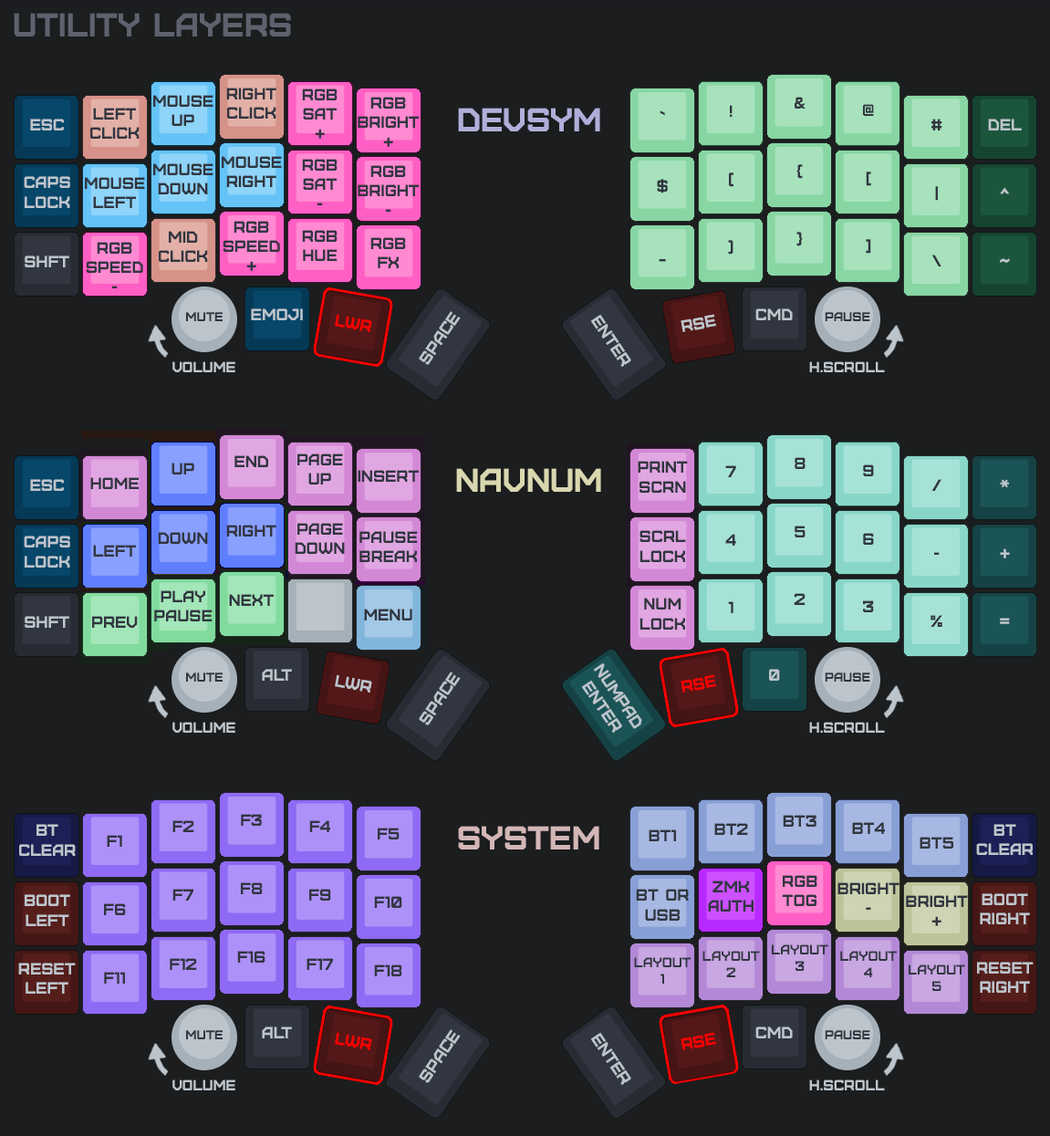
<style>
.page{position:relative;width:1050px;height:1136px;background:#1b1d1e}
.page>*{position:absolute;margin:0}
.t1{font:32.8px "Furore";color:#5d626e}
.t2{font:16.4px "Furore";color:#313640}
.t3{font:32.8px "Furore";color:#afafd9}
.t4{font:16.4px "Furore";color:#bdc5cc}
.t5{font:12.8px "Furore";color:#313640}
.t6{font:16.4px "Furore";color:#ff0000}
.t7{font:14.6px "Furore";color:#bdc5cc}
.t8{font:32.8px "Furore";color:#d9d7af}
.t9{font:32.8px "Furore";color:#d3b6b6}
.t10{font:13.7px "Furore";color:#313640}
</style>
<div class="page">
<p class="t1" style="left:14px;top:13px;width:277px;height:23px">UTILITY LAYERS</p>
<p class="t2" style="left:226px;top:88px;width:50px;height:31px;text-align:center">RIGHT<br>CLICK</p>
<p class="t2" style="left:302px;top:88px;width:36px;height:51px;text-align:center">RGB<br>SAT<br>+</p>
<p class="t2" style="left:153px;top:95px;width:60px;height:31px;text-align:center">MOUSE<br>UP</p>
<p class="t2" style="left:358px;top:97px;width:62px;height:50px;text-align:center">RGB<br>BRIGHT<br>+</p>
<p class="t2" style="left:795px;top:97px;width:10px;height:12px">&amp;</p>
<p class="t2" style="left:90px;top:108px;width:50px;height:31px;text-align:center">LEFT<br>CLICK</p>
<p class="t3" style="left:458px;top:108px;width:142px;height:23px">DEVSYM</p>
<p class="t2" style="left:660px;top:110px;width:5px;height:6px">`</p>
<p class="t2" style="left:730px;top:105px;width:3px;height:12px">!</p>
<p class="t2" style="left:863px;top:104px;width:11px;height:12px">@</p>
<p class="t4" style="left:30px;top:119px;width:34px;height:11px">ESC</p>
<p class="t2" style="left:931px;top:119px;width:11px;height:11px">#</p>
<p class="t4" style="left:988px;top:119px;width:34px;height:11px">del</p>
<p class="t2" style="left:222px;top:156px;width:60px;height:31px;text-align:center">MOUSE<br>RIGHT</p>
<p class="t2" style="left:302px;top:159px;width:36px;height:46px;text-align:center">RGB<br>SAT<br>-</p>
<p class="t2" style="left:153px;top:163px;width:60px;height:31px;text-align:center">MOUSE<br>DOWN</p>
<p class="t2" style="left:358px;top:165px;width:62px;height:47px;text-align:center">RGB<br>BRIGHT<br>-</p>
<p class="t2" style="left:729px;top:172px;width:4px;height:15px">(</p>
<p class="t2" style="left:796px;top:164px;width:7px;height:15px">{</p>
<p class="t2" style="left:866px;top:171px;width:5px;height:15px">[</p>
<p class="t4" style="left:24px;top:176px;width:46px;height:32px;text-align:center">Caps<br>lock</p>
<p class="t2" style="left:85px;top:177px;width:60px;height:31px;text-align:center">MOUSE<br>LEFT</p>
<p class="t2" style="left:657px;top:179px;width:11px;height:14px">$</p>
<p class="t2" style="left:935px;top:186px;width:3px;height:15px">|</p>
<p class="t4" style="left:1000px;top:187px;width:10px;height:7px">^</p>
<p class="t2" style="left:223px;top:221px;width:57px;height:50px;text-align:center">RGB<br>SPEED<br>+</p>
<p class="t2" style="left:159px;top:231px;width:49px;height:31px;text-align:center">MID<br>CLICK</p>
<p class="t2" style="left:302px;top:230px;width:36px;height:31px;text-align:center">RGB<br>HUE</p>
<p class="t2" style="left:796px;top:232px;width:7px;height:14px">}</p>
<p class="t2" style="left:86px;top:242px;width:57px;height:46px;text-align:center">RGB<br>SPEED<br>-</p>
<p class="t2" style="left:370px;top:237px;width:36px;height:31px;text-align:center">RGB<br>FX</p>
<p class="t2" style="left:728px;top:240px;width:5px;height:15px">)</p>
<p class="t2" style="left:866px;top:239px;width:5px;height:15px">]</p>
<p class="t4" style="left:25px;top:255px;width:44px;height:12px">SHFT</p>
<p class="t2" style="left:931px;top:255px;width:10px;height:11px">\</p>
<p class="t2" style="left:659px;top:259px;width:7px;height:3px">_</p>
<p class="t4" style="left:1000px;top:258px;width:10px;height:5px">~</p>
<p class="t5" style="left:186px;top:312px;width:37px;height:9px">MUTE</p>
<p class="t4" style="left:251px;top:308px;width:52px;height:12px">EMOJI</p>
<p class="t6" style="left:335px;top:314px;width:37px;height:18px;rotate:10deg">LWR</p>
<p class="t4" style="left:419px;top:311px;width:42px;height:54px;rotate:-56deg">SPACE</p>
<p class="t4" style="left:590px;top:314px;width:41px;height:53px;rotate:56deg">ENTER</p>
<p class="t4" style="left:681px;top:314px;width:35px;height:18px;rotate:-10deg">RSE</p>
<p class="t4" style="left:755px;top:308px;width:38px;height:12px">CMD</p>
<p class="t5" style="left:825px;top:312px;width:45px;height:9px">PAUSE</p>
<p class="t7" style="left:172px;top:361px;width:63px;height:11px">VOLUME</p>
<p class="t7" style="left:809px;top:361px;width:76px;height:11px">H.SCROLL</p>
<p class="t2" style="left:234px;top:455px;width:34px;height:12px">end</p>
<p class="t2" style="left:297px;top:453px;width:46px;height:31px;text-align:center">PAGE<br>UP</p>
<p class="t2" style="left:638px;top:461px;width:50px;height:32px;text-align:center">PRINT<br>SCRN</p>
<p class="t2" style="left:795px;top:457px;width:10px;height:12px">8</p>
<p class="t2" style="left:171px;top:462px;width:23px;height:12px">up</p>
<p class="t2" style="left:358px;top:470px;width:61px;height:12px">insert</p>
<p class="t8" style="left:456px;top:468px;width:145px;height:24px">NAVNUM</p>
<p class="t2" style="left:725px;top:465px;width:11px;height:12px">7</p>
<p class="t2" style="left:863px;top:464px;width:11px;height:12px">9</p>
<p class="t4" style="left:30px;top:479px;width:34px;height:12px">ESC</p>
<p class="t2" style="left:90px;top:477px;width:49px;height:12px">home</p>
<p class="t2" style="left:931px;top:479px;width:10px;height:12px">/</p>
<p class="t4" style="left:1000px;top:479px;width:9px;height:9px">*</p>
<p class="t2" style="left:158px;top:532px;width:50px;height:12px">DOWN</p>
<p class="t2" style="left:226px;top:525px;width:50px;height:11px">RIGHT</p>
<p class="t2" style="left:295px;top:523px;width:50px;height:31px;text-align:center">PAGE<br>DOWN</p>
<p class="t2" style="left:359px;top:531px;width:59px;height:31px;text-align:center">PAUSE<br>BREAK</p>
<p class="t2" style="left:639px;top:530px;width:47px;height:32px;text-align:center">SCRL<br>lock</p>
<p class="t2" style="left:725px;top:534px;width:11px;height:12px">4</p>
<p class="t2" style="left:795px;top:525px;width:10px;height:12px">5</p>
<p class="t2" style="left:863px;top:533px;width:11px;height:12px">6</p>
<p class="t4" style="left:24px;top:535px;width:46px;height:32px;text-align:center">caps<br>lock</p>
<p class="t2" style="left:93px;top:545px;width:43px;height:11px">LEFT</p>
<p class="t2" style="left:934px;top:552px;width:6px;height:3px">-</p>
<p class="t4" style="left:1000px;top:548px;width:10px;height:10px">+</p>
<p class="t2" style="left:154px;top:590px;width:59px;height:31px;text-align:center">PLAY<br>PAUSE</p>
<p class="t2" style="left:229px;top:594px;width:45px;height:12px">NEXT</p>
<p class="t2" style="left:794px;top:593px;width:11px;height:12px">2</p>
<p class="t2" style="left:639px;top:597px;width:46px;height:32px;text-align:center">NUM<br>lock</p>
<p class="t2" style="left:728px;top:601px;width:5px;height:12px">1</p>
<p class="t2" style="left:863px;top:600px;width:11px;height:12px">3</p>
<p class="t4" style="left:25px;top:616px;width:44px;height:12px">SHFT</p>
<p class="t2" style="left:92px;top:616px;width:46px;height:12px">PREV</p>
<p class="t2" style="left:364px;top:608px;width:48px;height:12px">MENU</p>
<p class="t2" style="left:930px;top:615px;width:12px;height:12px">%</p>
<p class="t4" style="left:1000px;top:618px;width:10px;height:6px">=</p>
<p class="t4" style="left:581px;top:662px;width:61px;height:71px;text-align:center;rotate:56deg">numpad<br>ENTER</p>
<p class="t5" style="left:186px;top:672px;width:37px;height:9px">MUTE</p>
<p class="t4" style="left:262px;top:669px;width:30px;height:12px">ALT</p>
<p class="t4" style="left:335px;top:674px;width:37px;height:18px;rotate:10deg">LWR</p>
<p class="t4" style="left:419px;top:671px;width:42px;height:54px;rotate:-56deg">SPACE</p>
<p class="t6" style="left:681px;top:674px;width:35px;height:18px;rotate:-10deg">RSE</p>
<p class="t4" style="left:769px;top:669px;width:11px;height:12px">0</p>
<p class="t5" style="left:825px;top:672px;width:45px;height:9px">PAUSE</p>
<p class="t7" style="left:172px;top:722px;width:63px;height:11px">VOLUME</p>
<p class="t7" style="left:809px;top:722px;width:76px;height:11px">H.SCROLL</p>
<p class="t2" style="left:172px;top:820px;width:22px;height:12px">F2</p>
<p class="t2" style="left:241px;top:814px;width:21px;height:12px">F3</p>
<p class="t2" style="left:309px;top:820px;width:21px;height:12px">F4</p>
<p class="t2" style="left:783px;top:815px;width:33px;height:11px">bt3</p>
<p class="t2" style="left:852px;top:822px;width:33px;height:12px">bt4</p>
<p class="t4" style="left:19px;top:824px;width:57px;height:32px;text-align:center">bt<br>clear</p>
<p class="t2" style="left:378px;top:827px;width:22px;height:12px">F5</p>
<p class="t9" style="left:458px;top:826px;width:141px;height:23px">system</p>
<p class="t2" style="left:649px;top:829px;width:27px;height:12px">bt1</p>
<p class="t2" style="left:714px;top:823px;width:34px;height:12px">bt2</p>
<p class="t4" style="left:976px;top:824px;width:57px;height:31px;text-align:center">bt<br>clear</p>
<p class="t2" style="left:107px;top:835px;width:15px;height:12px">F1</p>
<p class="t2" style="left:920px;top:836px;width:33px;height:12px">bt5</p>
<p class="t2" style="left:708px;top:880px;width:45px;height:31px;text-align:center">zmk<br>AUTH</p>
<p class="t2" style="left:782px;top:875px;width:35px;height:31px;text-align:center">RGB<br>TOG</p>
<p class="t4" style="left:25px;top:894px;width:45px;height:32px;text-align:center">boot<br>lEFT</p>
<p class="t2" style="left:172px;top:888px;width:21px;height:12px">F7</p>
<p class="t2" style="left:241px;top:882px;width:22px;height:12px">F8</p>
<p class="t2" style="left:309px;top:888px;width:22px;height:12px">F9</p>
<p class="t2" style="left:636px;top:888px;width:53px;height:32px;text-align:center">bt or<br>usb</p>
<p class="t2" style="left:837px;top:882px;width:62px;height:27px;text-align:center">BRIGHT<br>-</p>
<p class="t4" style="left:980px;top:893px;width:50px;height:31px;text-align:center">boot<br>RIGHT</p>
<p class="t2" style="left:104px;top:903px;width:22px;height:12px">F6</p>
<p class="t2" style="left:374px;top:896px;width:28px;height:12px">F10</p>
<p class="t2" style="left:906px;top:895px;width:62px;height:31px;text-align:center">BRIGHT<br>+</p>
<p class="t2" style="left:237px;top:951px;width:28px;height:11px">f16</p>
<p class="t10" style="left:702px;top:951px;width:58px;height:26px;text-align:center">LAYOUT<br>2</p>
<p class="t10" style="left:772px;top:944px;width:56px;height:27px;text-align:center">layout<br>3</p>
<p class="t10" style="left:840px;top:951px;width:57px;height:26px;text-align:center">LAYOUT<br>4</p>
<p class="t4" style="left:18px;top:962px;width:58px;height:31px;text-align:center">reset<br>left</p>
<p class="t2" style="left:170px;top:958px;width:27px;height:12px">F12</p>
<p class="t2" style="left:307px;top:958px;width:26px;height:12px">F17</p>
<p class="t2" style="left:374px;top:964px;width:28px;height:12px">F18</p>
<p class="t10" style="left:634px;top:957px;width:57px;height:26px;text-align:center">LAYOUT<br>1</p>
<p class="t10" style="left:909px;top:964px;width:56px;height:27px;text-align:center">LAYOUT<br>5</p>
<p class="t4" style="left:977px;top:961px;width:57px;height:31px;text-align:center">reset<br>right</p>
<p class="t2" style="left:104px;top:972px;width:21px;height:11px">F11</p>
<p class="t5" style="left:186px;top:1030px;width:37px;height:9px">MUTE</p>
<p class="t4" style="left:262px;top:1026px;width:30px;height:12px">ALT</p>
<p class="t6" style="left:335px;top:1032px;width:37px;height:18px;rotate:10deg">LWR</p>
<p class="t4" style="left:419px;top:1029px;width:42px;height:54px;rotate:-56deg">SPACE</p>
<p class="t4" style="left:590px;top:1032px;width:41px;height:53px;rotate:56deg">ENTER</p>
<p class="t6" style="left:681px;top:1032px;width:35px;height:18px;rotate:-10deg">RSE</p>
<p class="t4" style="left:755px;top:1026px;width:38px;height:12px">CMD</p>
<p class="t5" style="left:825px;top:1030px;width:45px;height:9px">PAUSE</p>
<p class="t7" style="left:172px;top:1079px;width:63px;height:11px">VOLUME</p>
<p class="t7" style="left:809px;top:1079px;width:76px;height:11px">H.SCROLL</p>
</div>
